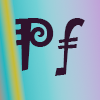
<style>
.page{position:relative;width:100px;height:100px}
.page>*{position:absolute;margin:0}
.t1{font:61.2px "Jokerman-Regular";color:#30132d}
</style>
<div class="page">
<p class="t1" style="left:15px;top:18px;width:70px;height:58px">Pf</p>
</div>
